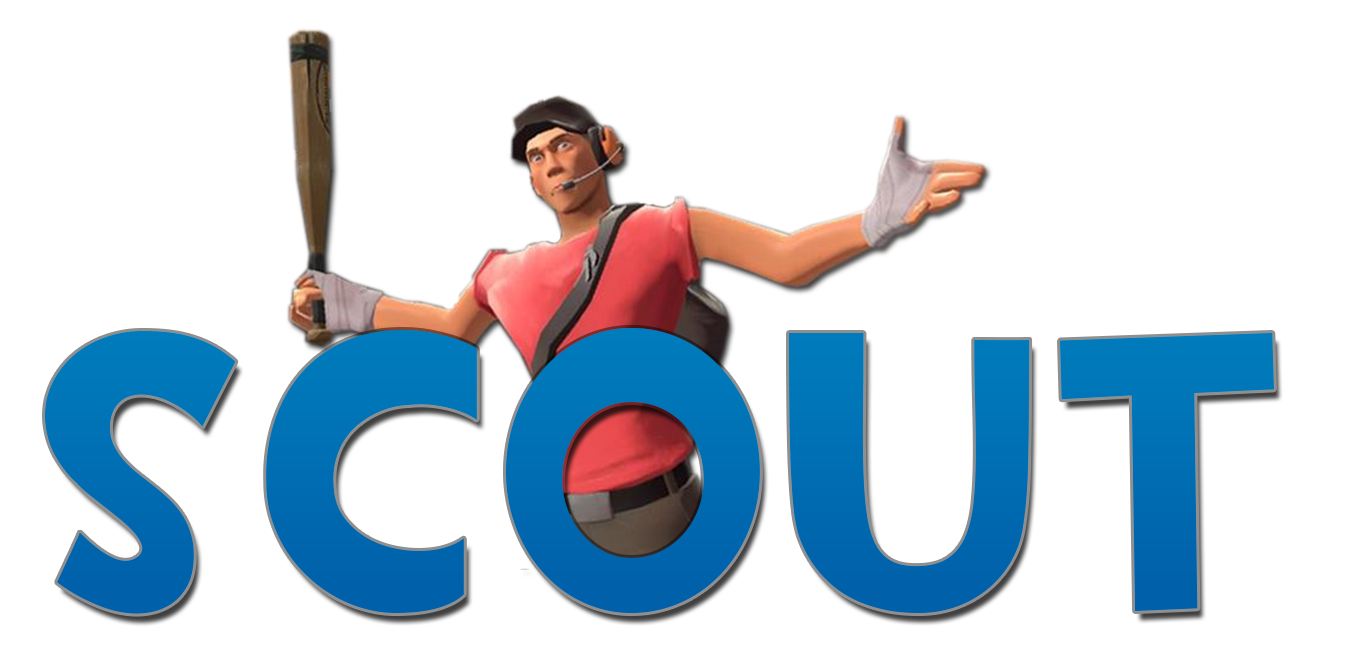
<style>
.page{position:relative;width:1368px;height:648px;background:#ffffff}
.page>*{position:absolute;margin:0}
.t1{font:397.1px "TF2Build";letter-spacing:0.04em;color:#006fb3;scale:0.87 1}
</style>
<div class="page">
<p class="t1" style="left:45px;top:328px;width:1229px;height:286px">SCOUT</p>
</div>
